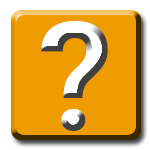
<style>
.page{position:relative;width:150px;height:150px;background:#ef9c00}
.page>*{position:absolute;margin:0}
.t1{font:151.4px "Roboto-Bold"}
</style>
<div class="page">
<p class="t1" style="left:41px;top:21px;width:67px;height:110px">?</p>
</div>
